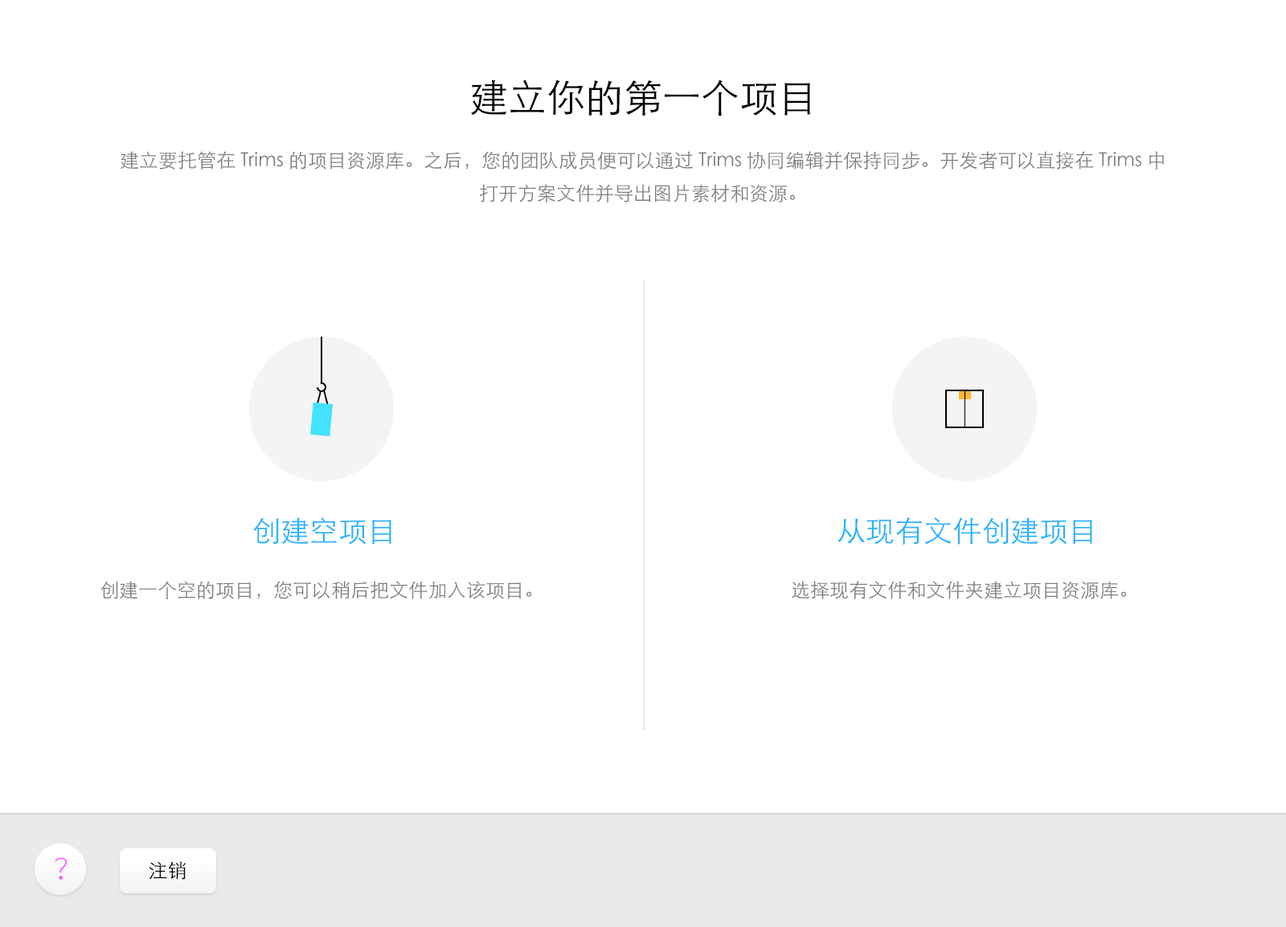
<style>
.page{position:relative;width:1286px;height:927px;background:#ffffff}
.page>*{position:absolute;margin:0}
.t1{font:38.6px "STHeitiSC-Light";color:#000000}
.t2{font:19.3px/32.9px "STHeitiSC-Light";color:#7d7d7d}
.t3{font:28.9px "STHeitiSC-Light";color:#27b3fc}
.t4{font:19.3px "STHeitiSC-Light";color:#7d7d7d}
.t5{font:28.9px "SourceHanSansCN-Light";color:#fd5eff}
.t6{font:19.3px "STHeitiSC-Light";color:#000000}
</style>
<div class="page">
<p class="t1" style="left:470px;top:80px;width:340px;height:36px">建立你的第一个项目</p>
<p class="t2" style="left:120px;top:151px;width:1044px;height:52px;text-align:center">建立要托管在 Trims 的项目资源库。之后，您的团队成员便可以通过 Trims 协同编辑并保持同步。开发者可以直接在 Trims 中<br>打开方案文件并导出图片素材和资源。</p>
<p class="t3" style="left:253px;top:518px;width:138px;height:27px">创建空项目</p>
<p class="t3" style="left:837px;top:518px;width:255px;height:27px">从现有文件创建项目</p>
<p class="t4" style="left:100px;top:581px;width:431px;height:19px">创建一个空的项目，您可以稍后把文件加入该项目。</p>
<p class="t4" style="left:792px;top:581px;width:334px;height:19px">选择现有文件和文件夹建立项目资源库。</p>
<p class="t5" style="left:55px;top:857px;width:13px;height:23px">？</p>
<p class="t6" style="left:149px;top:861px;width:37px;height:19px">注销</p>
</div>
